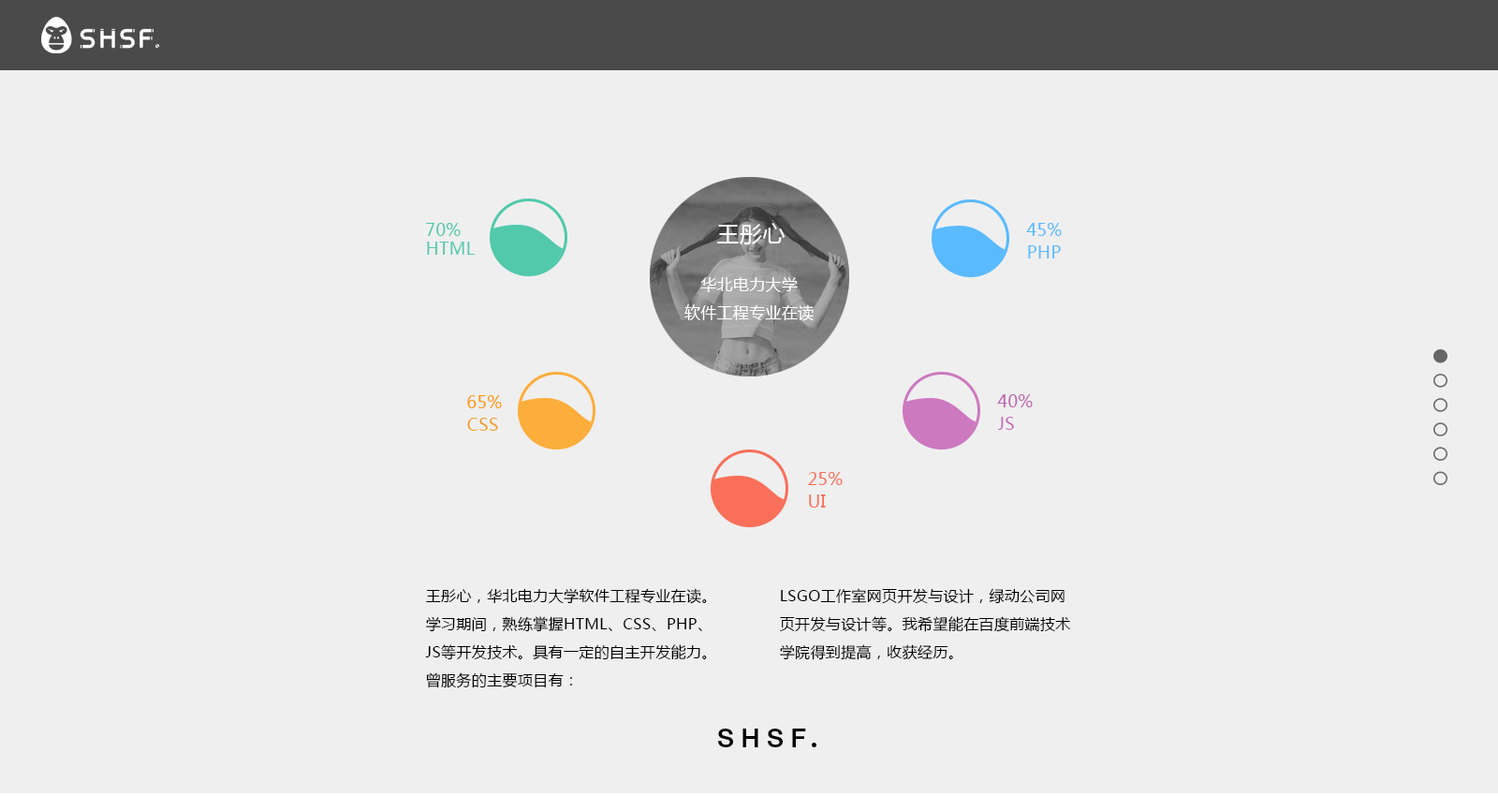
<style>
.page{position:relative;width:1498px;height:796px;background:#efefef}
.page>*{position:absolute;margin:0}
.t1{font:16.9px "MicrosoftYaHei";letter-spacing:0.02em;color:#52c9ab}
.t2{font:22.5px "MicrosoftYaHei";letter-spacing:0.02em;color:#ffffff}
.t3{font:16.9px "MicrosoftYaHei";letter-spacing:0.02em;color:#59baff}
.t4{font:15.9px/28.1px "MicrosoftYaHei";letter-spacing:0.02em;color:#ffffff}
.t5{font:16.9px "MicrosoftYaHei";letter-spacing:0.02em;color:#fe9802}
.t6{font:16.9px "MicrosoftYaHei";letter-spacing:0.02em;color:#bd66af}
.t7{font:16.9px "MicrosoftYaHei";letter-spacing:0.02em;color:#f39e20}
.t8{font:16.9px "MicrosoftYaHei";letter-spacing:0.02em;color:#c469b6}
.t9{font:16.9px "MicrosoftYaHei";letter-spacing:0.02em;color:#f96f59}
.t10{font:15px/28.1px "MicrosoftYaHei";letter-spacing:0.02em;color:#000000}
</style>
<div class="page">
<p class="t1" style="left:426px;top:223px;width:35px;height:13px">70%</p>
<p class="t2" style="left:717px;top:223px;width:69px;height:21px">王彤心</p>
<p class="t3" style="left:1026px;top:223px;width:36px;height:13px">45%</p>
<p class="t1" style="left:427px;top:242px;width:48px;height:13px">HTML</p>
<p class="t3" style="left:1028px;top:245px;width:33px;height:13px">PHP</p>
<p class="t4" style="left:684px;top:277px;width:130px;height:44px;text-align:center">华北电力大学<br>软件工程专业在读</p>
<p class="t5" style="left:467px;top:395px;width:35px;height:13px">65%</p>
<p class="t6" style="left:997px;top:394px;width:36px;height:13px">40%</p>
<p class="t7" style="left:467px;top:418px;width:31px;height:13px">CSS</p>
<p class="t8" style="left:997px;top:417px;width:17px;height:13px">JS</p>
<p class="t9" style="left:808px;top:472px;width:35px;height:13px">25%</p>
<p class="t9" style="left:809px;top:494px;width:17px;height:14px">UI</p>
<p class="t10" style="left:425px;top:588px;width:282px;height:100px">王彤心，华北电力大学软件工程专业在读。学习期间，熟练掌握HTML、CSS、PHP、JS等开发技术。具有一定的自主开发能力。曾服务的主要项目有：</p>
<p class="t10" style="left:780px;top:588px;width:291px;height:72px">LSGO工作室网页开发与设计，绿动公司网页开发与设计等。我希望能在百度前端技术学院得到提高，收获经历。</p>
</div>
